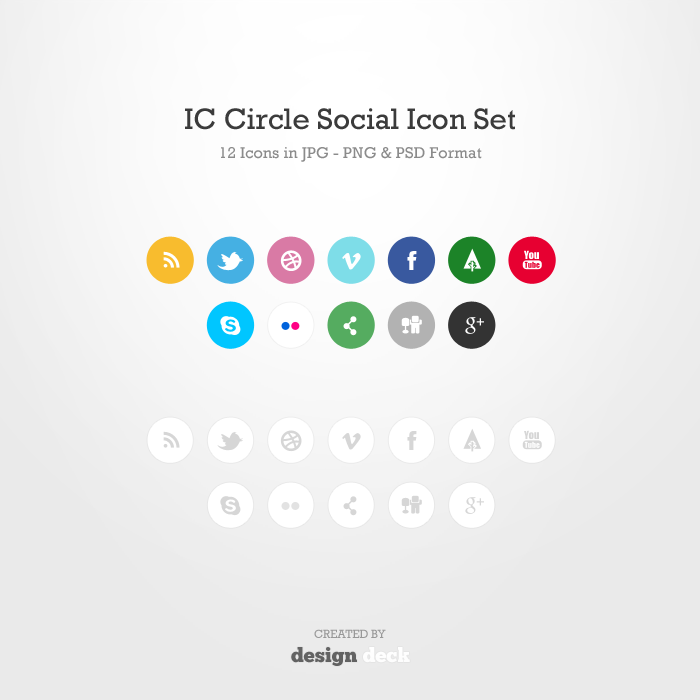
<style>
.page{position:relative;width:700px;height:700px}
.page>*{position:absolute;margin:0}
.t1{font:30px "Rockwell";color:#3b3b3b}
.t2{font:16px "Rockwell";letter-spacing:0.005em;color:#8b8b8b}
.t3{font:14.8px "ArialMT";color:#ffffff}
.t4{font:14.8px "ArialMT";color:#d6d6d6}
.t5{font:12px "Rockwell";letter-spacing:-0.015em;color:#989898;text-transform:uppercase}
.t6{font:20px "ChunkFive";letter-spacing:0.005em;color:#626262}
.t7{font:20px "ChunkFive";letter-spacing:0.005em;color:#ffffff}
</style>
<div class="page">
<p class="t1" style="left:185px;top:108px;width:330px;height:22px">IC Circle Social Icon Set</p>
<p class="t2" style="left:221px;top:147px;width:261px;height:15px">12 Icons in JPG - PNG &amp; PSD Format</p>
<p class="t3" style="left:476px;top:318px;width:8px;height:8px">+</p>
<p class="t4" style="left:476px;top:498px;width:8px;height:8px">+</p>
<p class="t5" style="left:314px;top:629px;width:72px;height:9px">Created by</p>
<p class="t6" style="left:291px;top:647px;width:119px;height:19px">design <span class="t7">deck</span></p>
</div>
